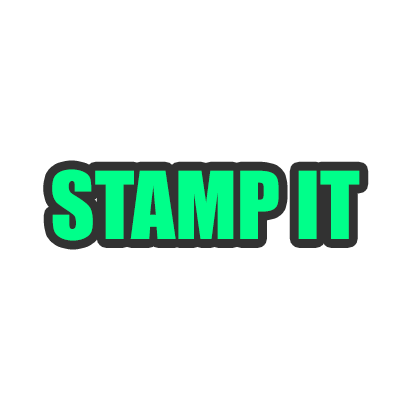
<style>
.page{position:relative;width:414px;height:414px;background:#ffffff}
.page>*{position:absolute;margin:0}
.t1{font:86.2px "Impact";color:#00ff8a}
</style>
<div class="page">
<p class="t1" style="left:52px;top:169px;width:308px;height:72px">STAMP IT</p>
</div>
